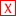
<style>
.page{position:relative;width:16px;height:16px;background:#ffffff}
.page>*{position:absolute;margin:0}
.t1{font:14px "Fontin-Regular";color:#ff0000}
</style>
<div class="page">
<p class="t1" style="left:4px;top:3px;width:8px;height:11px">X</p>
</div>
